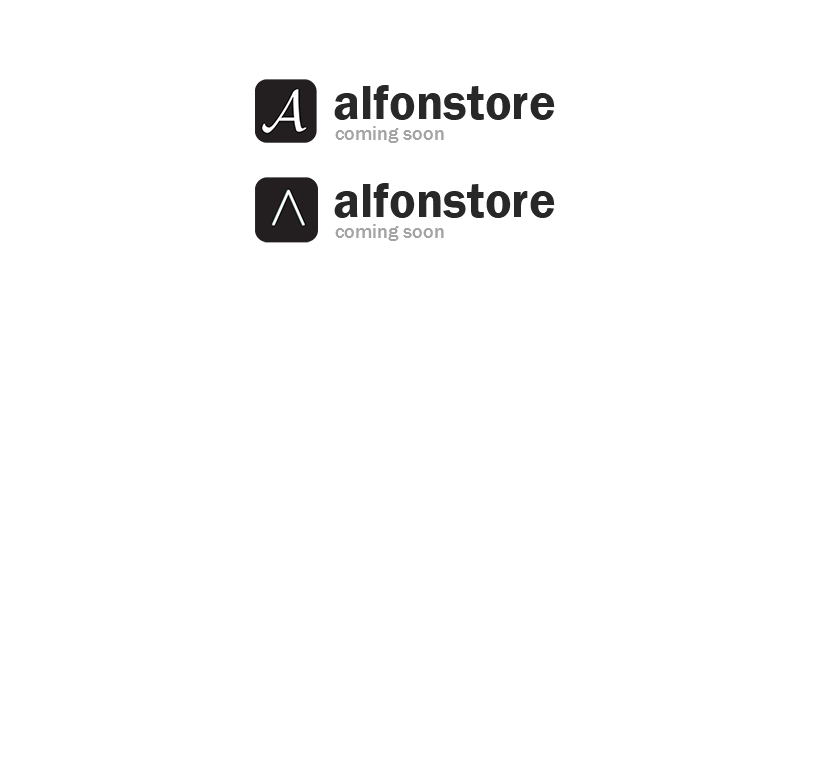
<style>
.page{position:relative;width:820px;height:773px;background:#ffffff}
.page>*{position:absolute;margin:0}
.t1{font:50px "FranklinGothic-Demi";color:#282828}
.t2{font:20px "FranklinGothic-Medium";color:#a4a4a4}
</style>
<div class="page">
<p class="t1" style="left:334px;top:85px;width:221px;height:35px">alfonstore</p>
<p class="t2" style="left:335px;top:126px;width:109px;height:17px">coming soon</p>
<p class="t1" style="left:334px;top:183px;width:221px;height:35px">alfonstore</p>
<p class="t2" style="left:335px;top:224px;width:109px;height:17px">coming soon</p>
</div>
